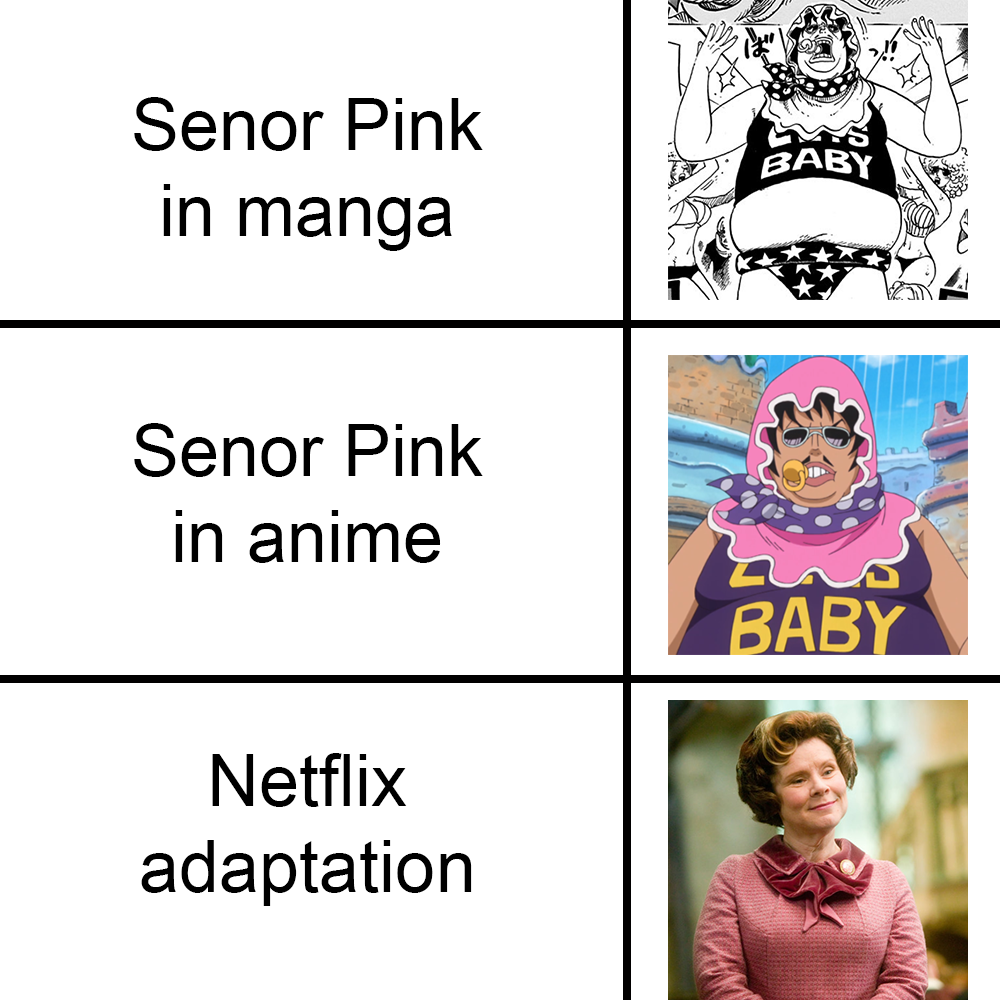
<style>
.page{position:relative;width:1000px;height:1000px;background:#ffffff}
.page>*{position:absolute;margin:0}
.t1{font:72px "ArialMT";color:#000000}
</style>
<div class="page">
<p class="t1" style="left:134px;top:97px;width:349px;height:154px;text-align:center">Senor Pink <br>in manga</p>
<p class="t1" style="left:134px;top:423px;width:349px;height:140px;text-align:center">Senor Pink<br>in anime</p>
<p class="t1" style="left:141px;top:753px;width:331px;height:153px;text-align:center">Netflix <br>adaptation</p>
</div>
